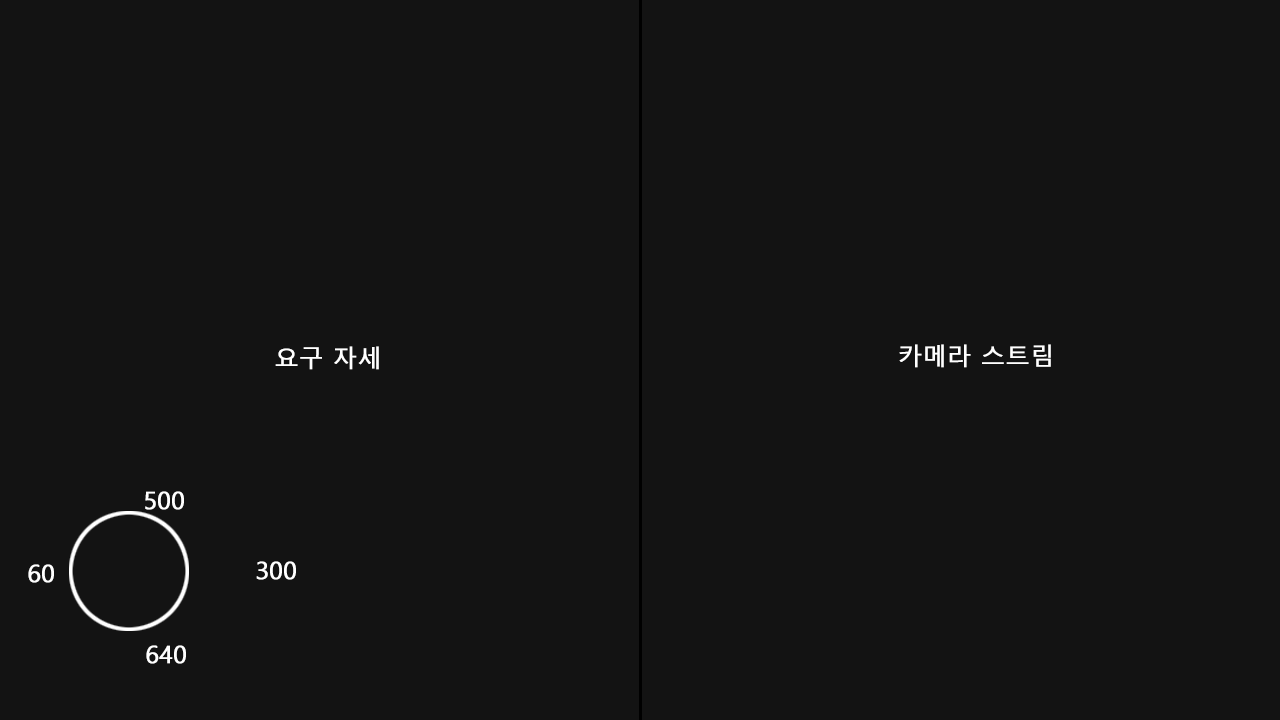
<style>
.page{position:relative;width:1280px;height:720px;background:#131313}
.page>*{position:absolute;margin:0}
.t1{font:24px "MalgunGothic";color:#ffffff;font-weight:bold}
</style>
<div class="page">
<p class="t1" style="left:275px;top:346px;width:104px;height:24px">요구 자세</p>
<p class="t1" style="left:899px;top:344px;width:152px;height:24px">카메라 스트림</p>
<p class="t1" style="left:145px;top:491px;width:39px;height:19px">500</p>
<p class="t1" style="left:28px;top:564px;width:26px;height:19px">60</p>
<p class="t1" style="left:256px;top:561px;width:40px;height:19px">300</p>
<p class="t1" style="left:146px;top:645px;width:40px;height:19px">640</p>
</div>
